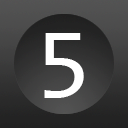
<style>
.page{position:relative;width:128px;height:128px}
.page>*{position:absolute;margin:0}
.t1{font:100px "Consolas";color:#ffffff}
</style>
<div class="page">
<p class="t1" style="left:44px;top:33px;width:40px;height:65px">5</p>
</div>
